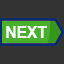
<style>
.page{position:relative;width:64px;height:64px;background:#333333}
.page>*{position:absolute;margin:0}
.t1{font:15.5px "Arial-BoldMT";color:#ffffff}
</style>
<div class="page">
<p class="t1" style="left:6px;top:26px;width:41px;height:12px">NEXT</p>
</div>
